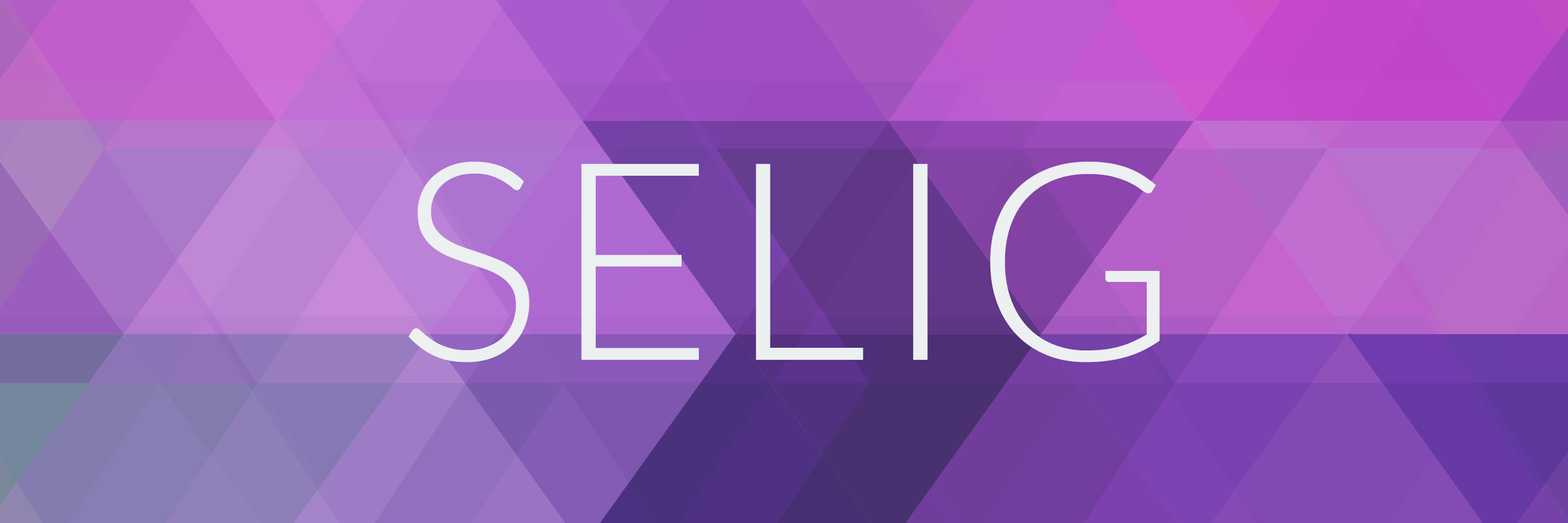
<style>
.page{position:relative;width:1568px;height:523px}
.page>*{position:absolute;margin:0}
.t1{font:276.6px "Lato-Light";letter-spacing:0.04em;color:#ecf0f1}
</style>
<div class="page">
<p class="t1" style="left:408px;top:162px;width:752px;height:200px">SELIG</p>
</div>
